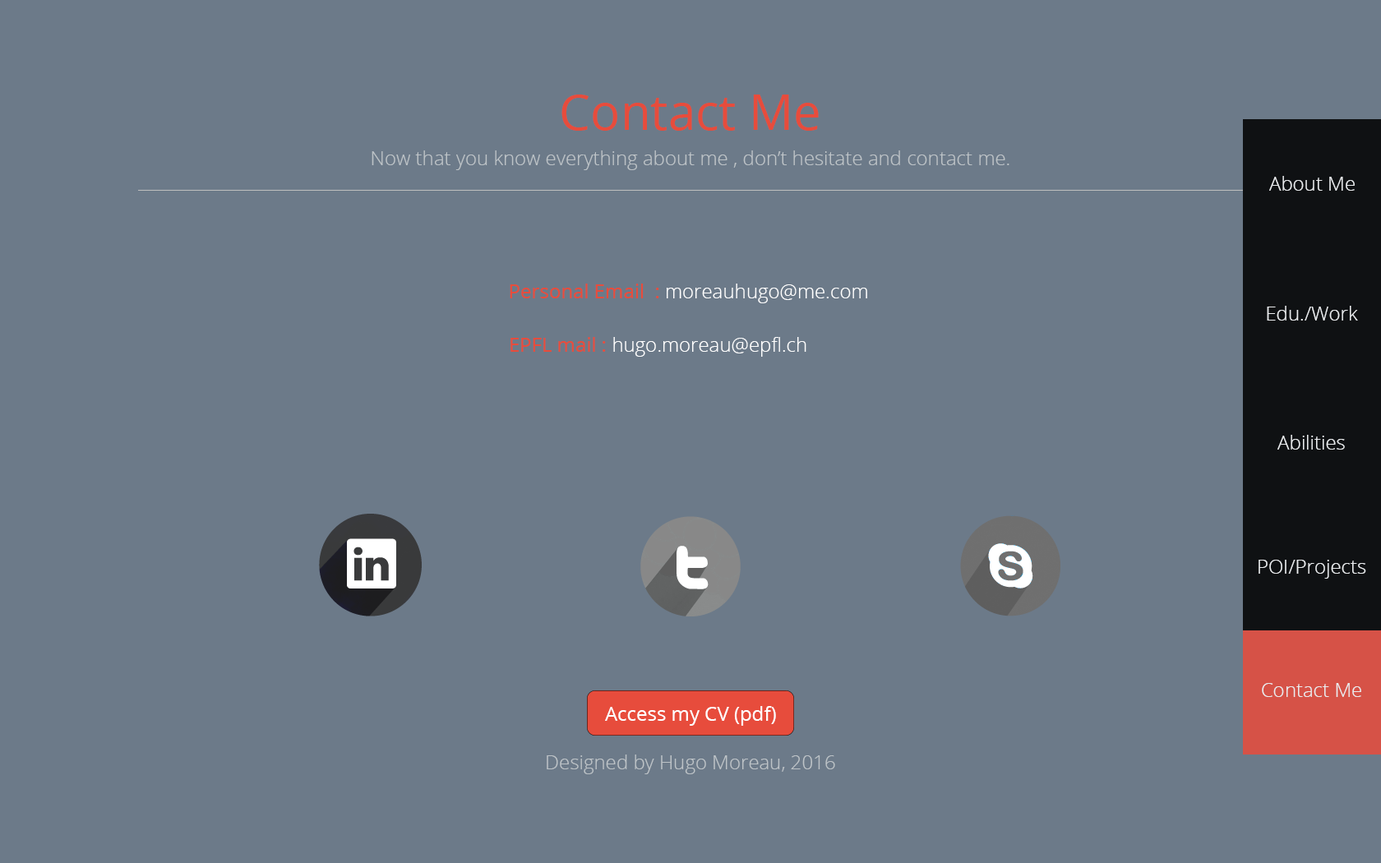
<style>
.page{position:relative;width:1381px;height:863px;background:#6c7a89}
.page>*{position:absolute;margin:0}
.t1{font:49.3px "OpenSans";color:#e74c3c}
.t2{font:19.7px "OpenSans-Light";color:#bdc3c7}
.t3{font:19.7px "OpenSans-Light";color:#ffffff}
.t4{font:19.7px "OpenSans";color:#e74c3c}
.t5{font:19.7px "OpenSans";color:#ffffff}
</style>
<div class="page">
<p class="t1" style="left:562px;top:95px;width:257px;height:36px">Contact Me</p>
<p class="t2" style="left:372px;top:150px;width:638px;height:20px">Now that you know everything about me , don’t hesitate and contact me.</p>
<p class="t3" style="left:1269px;top:176px;width:86px;height:15px">About Me</p>
<p class="t4" style="left:510px;top:284px;width:357px;height:19px">Personal Email  : <span class="t3">moreauhugo@me.com</span></p>
<p class="t3" style="left:1267px;top:306px;width:91px;height:15px">Edu./Work</p>
<p class="t3" style="left:511px;top:337px;width:296px;height:20px"><span class="t4">EPFL mail : </span>hugo.moreau@epfl.ch</p>
<p class="t3" style="left:1278px;top:435px;width:67px;height:15px">Abilities</p>
<p class="t3" style="left:1259px;top:560px;width:107px;height:19px">POI/Projects</p>
<p class="t3" style="left:1262px;top:683px;width:100px;height:14px">Contact Me</p>
<p class="t5" style="left:605px;top:706px;width:171px;height:20px">Access my CV (pdf)</p>
<p class="t2" style="left:547px;top:755px;width:288px;height:19px">Designed by Hugo Moreau, 2016</p>
</div>
